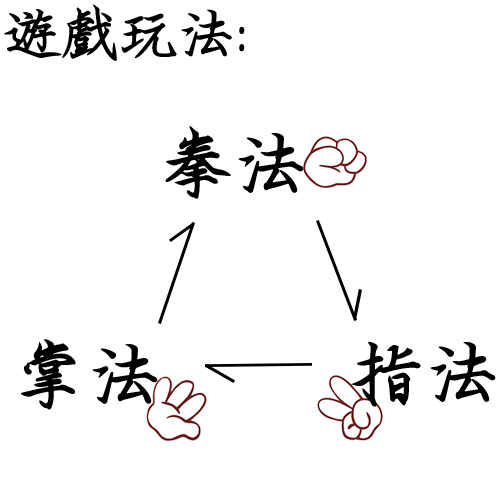
<style>
.page{position:relative;width:500px;height:500px;background:#ffffff}
.page>*{position:absolute;margin:0}
.t1{font:58.3px "HanWangWCL07";color:#000000}
.t2{font:75px "HanWangWCL07";color:#000000}
</style>
<div class="page">
<p class="t1" style="left:4px;top:4px;width:241px;height:57px">遊戲玩法:</p>
<p class="t2" style="left:165px;top:126px;width:139px;height:73px">拳法</p>
<p class="t2" style="left:21px;top:339px;width:137px;height:71px">掌法</p>
<p class="t2" style="left:351px;top:341px;width:145px;height:66px">指法</p>
</div>
